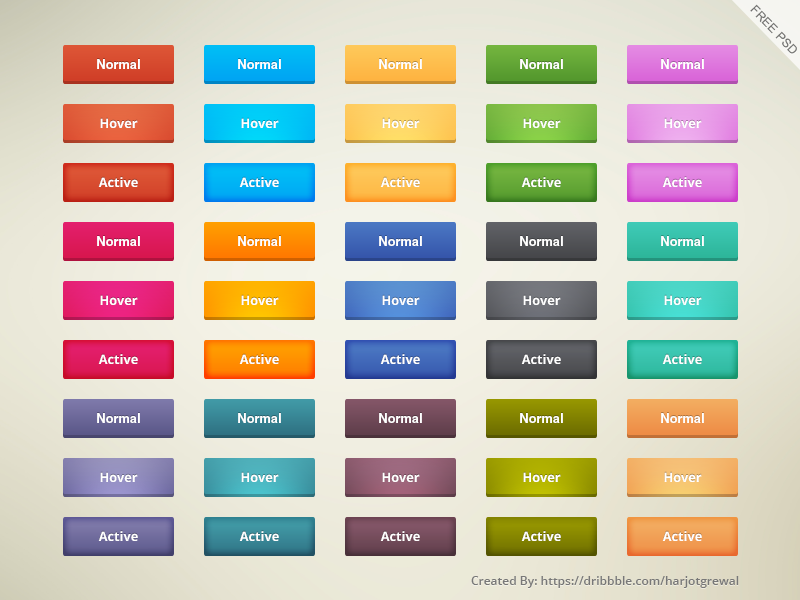
<style>
.page{position:relative;width:800px;height:600px}
.page>*{position:absolute;margin:0}
.t1{font:12px "ArialMT";letter-spacing:0.025em;color:#6f6f6d;text-transform:uppercase}
.t2{font:13px "Helvetica-Bold";color:#ffffff}
.t3{font:13px "OpenSans-Bold";color:#ffffff}
.t4{font:12px "OpenSans-Semibold";color:#787878}
</style>
<div class="page">
<p class="t1" style="left:750px;top:4px;width:47px;height:50px;rotate:46deg">Free Psd</p>
<p class="t2" style="left:97px;top:59px;width:43px;height:10px">Normal</p>
<p class="t2" style="left:238px;top:59px;width:43px;height:10px">Normal</p>
<p class="t2" style="left:379px;top:59px;width:43px;height:10px">Normal</p>
<p class="t2" style="left:520px;top:59px;width:43px;height:10px">Normal</p>
<p class="t2" style="left:661px;top:59px;width:43px;height:10px">Normal</p>
<p class="t3" style="left:100px;top:118px;width:38px;height:10px">Hover</p>
<p class="t3" style="left:241px;top:118px;width:38px;height:10px">Hover</p>
<p class="t3" style="left:382px;top:118px;width:38px;height:10px">Hover</p>
<p class="t3" style="left:523px;top:118px;width:38px;height:10px">Hover</p>
<p class="t3" style="left:664px;top:118px;width:38px;height:10px">Hover</p>
<p class="t3" style="left:98px;top:177px;width:40px;height:10px">Active</p>
<p class="t3" style="left:239px;top:177px;width:40px;height:10px">Active</p>
<p class="t3" style="left:380px;top:177px;width:40px;height:10px">Active</p>
<p class="t3" style="left:521px;top:177px;width:40px;height:10px">Active</p>
<p class="t3" style="left:662px;top:177px;width:40px;height:10px">Active</p>
<p class="t2" style="left:97px;top:236px;width:43px;height:10px">Normal</p>
<p class="t2" style="left:238px;top:236px;width:43px;height:10px">Normal</p>
<p class="t2" style="left:379px;top:236px;width:43px;height:10px">Normal</p>
<p class="t2" style="left:520px;top:236px;width:43px;height:10px">Normal</p>
<p class="t2" style="left:661px;top:236px;width:43px;height:10px">Normal</p>
<p class="t3" style="left:100px;top:295px;width:38px;height:10px">Hover</p>
<p class="t3" style="left:241px;top:295px;width:38px;height:10px">Hover</p>
<p class="t3" style="left:382px;top:295px;width:38px;height:10px">Hover</p>
<p class="t3" style="left:523px;top:295px;width:38px;height:10px">Hover</p>
<p class="t3" style="left:664px;top:295px;width:38px;height:10px">Hover</p>
<p class="t3" style="left:98px;top:354px;width:40px;height:10px">Active</p>
<p class="t3" style="left:239px;top:354px;width:40px;height:10px">Active</p>
<p class="t3" style="left:380px;top:354px;width:40px;height:10px">Active</p>
<p class="t3" style="left:521px;top:354px;width:40px;height:10px">Active</p>
<p class="t3" style="left:662px;top:354px;width:40px;height:10px">Active</p>
<p class="t2" style="left:97px;top:413px;width:43px;height:10px">Normal</p>
<p class="t2" style="left:238px;top:413px;width:43px;height:10px">Normal</p>
<p class="t2" style="left:379px;top:413px;width:43px;height:10px">Normal</p>
<p class="t2" style="left:520px;top:413px;width:43px;height:10px">Normal</p>
<p class="t2" style="left:661px;top:413px;width:43px;height:10px">Normal</p>
<p class="t3" style="left:100px;top:472px;width:38px;height:10px">Hover</p>
<p class="t3" style="left:241px;top:472px;width:38px;height:10px">Hover</p>
<p class="t3" style="left:382px;top:472px;width:38px;height:10px">Hover</p>
<p class="t3" style="left:523px;top:472px;width:38px;height:10px">Hover</p>
<p class="t3" style="left:664px;top:472px;width:38px;height:10px">Hover</p>
<p class="t3" style="left:98px;top:531px;width:40px;height:10px">Active</p>
<p class="t3" style="left:239px;top:531px;width:40px;height:10px">Active</p>
<p class="t3" style="left:380px;top:531px;width:40px;height:10px">Active</p>
<p class="t3" style="left:521px;top:531px;width:40px;height:10px">Active</p>
<p class="t3" style="left:662px;top:531px;width:40px;height:10px">Active</p>
<p class="t4" style="left:471px;top:576px;width:268px;height:12px">Created By: https://dribbble.com/harjotgrewal</p>
</div>
